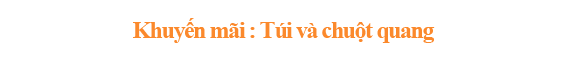
<style>
.page{position:relative;width:562px;height:60px;background:#ffffff}
.page>*{position:absolute;margin:0}
.t1{font:24px "TimesNewRomanPS-BoldMT";letter-spacing:-0.06em;color:#fb892c}
</style>
<div class="page">
<p class="t1" style="left:133px;top:18px;width:302px;height:25px">Khuyến mãi : Túi và chuột quang</p>
</div>
